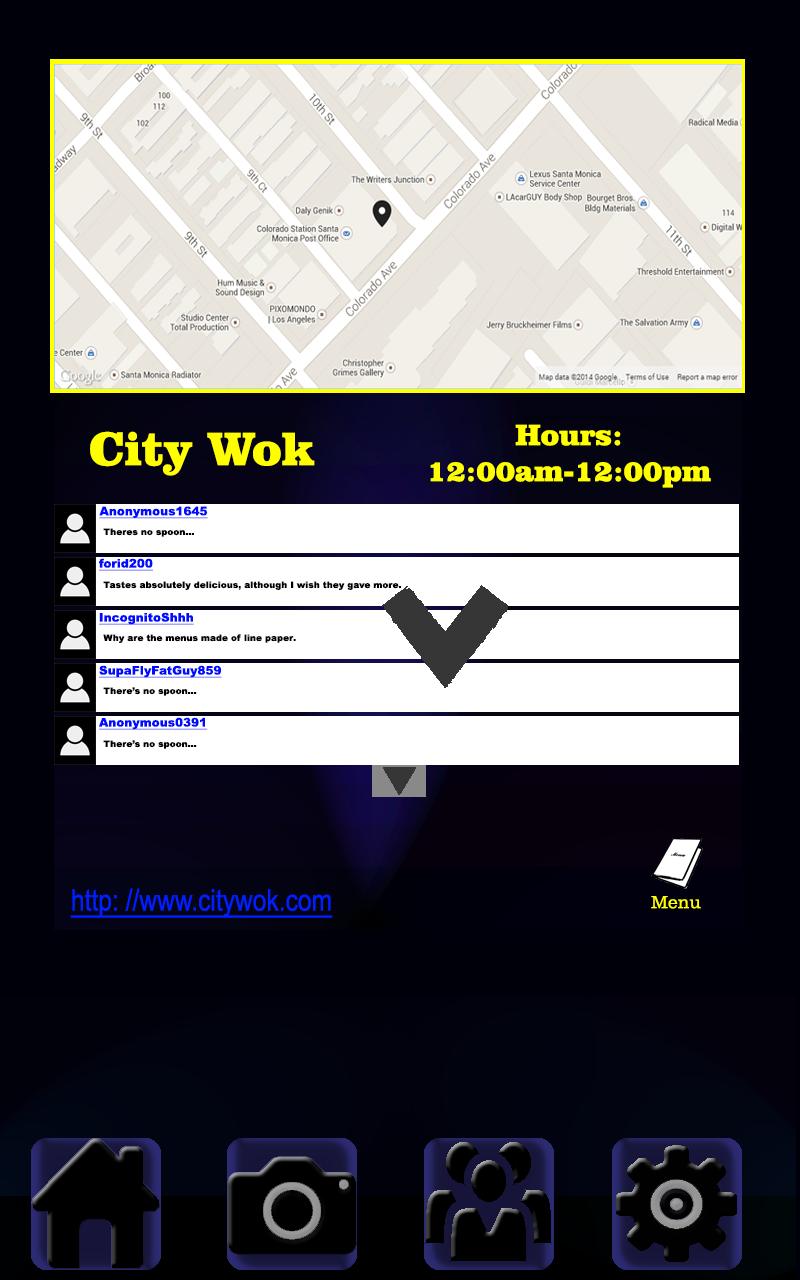
<style>
.page{position:relative;width:800px;height:1280px;background:#00000b}
.page>*{position:absolute;margin:0}
.t1{font:30px "ClarendonBT-Black";color:#ffff00}
.t2{font:48px "ClarendonBT-Black";color:#ffff00}
.t3{font:12px "Arial-Black";color:#000cff;text-decoration:underline}
.t4{font:9px "Arial-Black";color:#000000}
.t5{font:30px "ArialNarrow";color:#001eff;text-decoration:underline}
.t6{font:18px "ClarendonBT-Light";color:#ffff00}
</style>
<div class="page">
<p class="t1" style="left:430px;top:424px;width:281px;height:64px;text-align:center">:Hours<br>12:00am-12:00pm</p>
<p class="t2" style="left:90px;top:431px;width:225px;height:45px">City Wok</p>
<p class="t3" style="left:99px;top:506px;width:109px;height:13px">Anonymous1645</p>
<p class="t4" style="left:103px;top:528px;width:91px;height:9px">...Theres no spoon</p>
<p class="t3" style="left:99px;top:558px;width:54px;height:13px">forid200</p>
<p class="t4" style="left:103px;top:581px;width:298px;height:9px">.Tastes absolutely delicious, although I wish they gave more</p>
<p class="t3" style="left:99px;top:612px;width:95px;height:13px">IncognitoShhh</p>
<p class="t4" style="left:103px;top:634px;width:193px;height:9px">.Why are the menus made of line paper</p>
<p class="t3" style="left:99px;top:665px;width:123px;height:13px">SupaFlyFatGuy859</p>
<p class="t4" style="left:103px;top:687px;width:94px;height:9px">...There’s no spoon</p>
<p class="t3" style="left:99px;top:717px;width:109px;height:13px">Anonymous0391</p>
<p class="t4" style="left:103px;top:740px;width:94px;height:9px">...There’s no spoon</p>
<p class="t5" style="left:70px;top:888px;width:263px;height:30px">http: //www.citywok.com</p>
<p class="t6" style="left:651px;top:896px;width:50px;height:13px">Menu</p>
</div>
